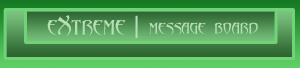
<style>
.page{position:relative;width:300px;height:68px}
.page>*{position:absolute;margin:0}
.t1{font:24px "Abaddon";color:#b5e0b5}
.t2{font:18px "Abaddon";color:#b5e0b5}
</style>
<div class="page">
<p class="t1" style="left:47px;top:15px;width:79px;height:21px">eXtreme</p>
<p class="t2" style="left:149px;top:22px;width:109px;height:13px">message board</p>
</div>
